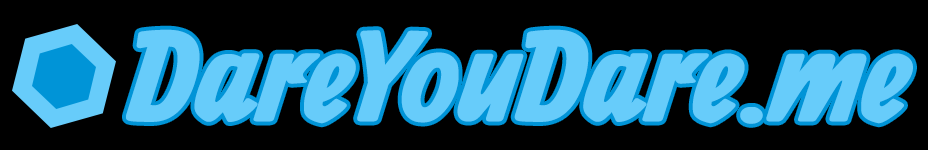
<style>
.page{position:relative;width:928px;height:150px;background:#000000}
.page>*{position:absolute;margin:0}
.t1{font:128.1px "Allan-Bold";color:#67ccfa;scale:1.21 1}
</style>
<div class="page">
<p class="t1" style="left:126px;top:29px;width:787px;height:95px">DareYouDare.me</p>
</div>
